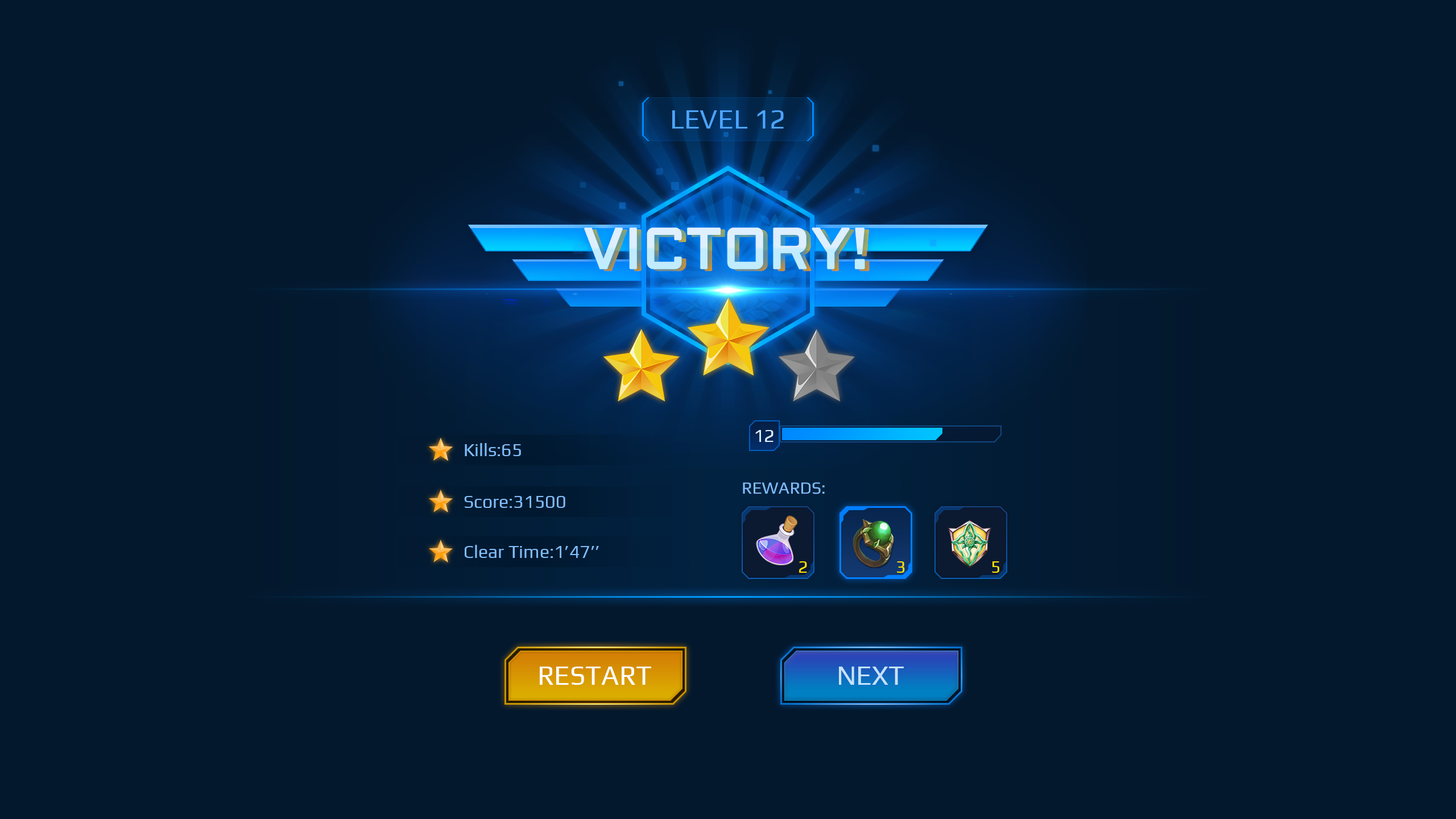
<style>
.page{position:relative;width:1456px;height:819px;background:#03182d}
.page>*{position:absolute;margin:0}
.t1{font:27.3px "Play-Regular";color:#4ba4ff}
.t2{font:56.9px "Aldrich";font-weight:bold}
.t3{font:18.2px "Play-Regular";color:#edf7ff}
.t4{font:18.2px "Play-Regular";color:#80bdfb}
.t5{font:17.1px "Play-Regular";color:#80bdfb}
.t6{font:17.1px "Play-Regular";color:#ffe400}
.t7{font:27.3px "Play-Regular";color:#ffffff}
.t8{font:27.3px "Play-Regular";color:#c6e2ff}
</style>
<div class="page">
<p class="t1" style="left:672px;top:110px;width:112px;height:19px">LEVEL 12</p>
<p class="t2" style="left:584px;top:227px;width:281px;height:43px">VICTORY!</p>
<p class="t2" style="left:589px;top:229px;width:281px;height:42px">VICTORY!</p>
<p class="t3" style="left:755px;top:430px;width:18px;height:12px">12</p>
<p class="t4" style="left:465px;top:443px;width:56px;height:13px">Kills:65</p>
<p class="t5" style="left:743px;top:482px;width:82px;height:12px">REWARDS:</p>
<p class="t4" style="left:464px;top:496px;width:101px;height:12px">Score:31500</p>
<p class="t4" style="left:465px;top:545px;width:134px;height:13px">Clear Time:1’47’’</p>
<p class="t6" style="left:799px;top:561px;width:8px;height:12px">2</p>
<p class="t6" style="left:897px;top:561px;width:8px;height:12px">3</p>
<p class="t6" style="left:992px;top:561px;width:7px;height:12px">5</p>
<p class="t7" style="left:540px;top:667px;width:111px;height:18px">RESTART</p>
<p class="t8" style="left:839px;top:667px;width:65px;height:18px">NEXT</p>
</div>
